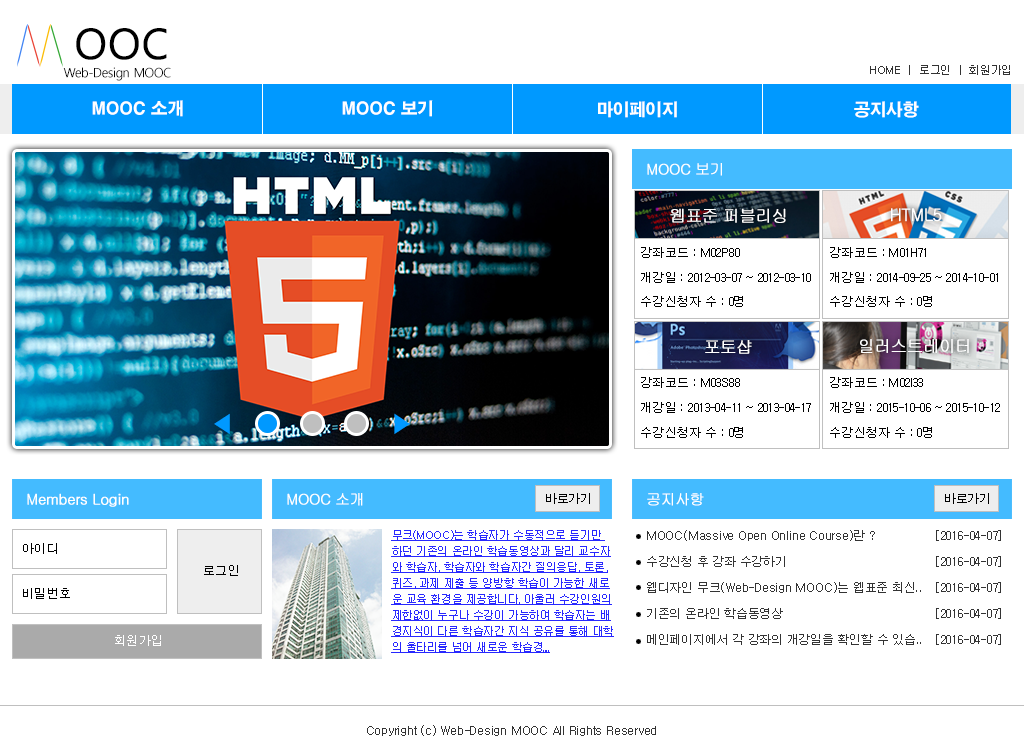
<style>
.page{position:relative;width:1024px;height:755px;background:#ffffff}
.page>*{position:absolute;margin:0}
.t1{font:42px "MalgunGothicRegular";color:#000000;font-weight:bold}
.t2{font:11px "Dotum";letter-spacing:-0.02em;color:#333333}
.t3{font:13px "MalgunGothicRegular";letter-spacing:-0.04em;color:#000000}
.t4{font:17px "H2gtrE";letter-spacing:-0.02em;color:#ffffff}
.t5{font:15px "Gulim";letter-spacing:-0.04em;color:#ffffff;font-weight:bold}
.t6{font:17px "Gulim";letter-spacing:-0.04em;color:#ffffff;font-weight:bold;scale:0.96 1}
.t7{font:12.9px/24.7px "Dotum";letter-spacing:-0.04em;color:#000000}
.t8{font:16.8px "Gulim";letter-spacing:-0.04em;color:#ffffff;font-weight:bold}
.t9{font:12px "Dotum";letter-spacing:-0.04em;color:#000000}
.t10{font:11px/16px "Dotum";letter-spacing:-0.04em;color:#2727ff;text-decoration:underline}
.t11{font:12px/26px "Dotum";letter-spacing:-0.02em;color:#333333}
.t12{font:13px "Dotum";letter-spacing:-0.04em;color:#000000}
.t13{font:13px "Dotum";letter-spacing:-0.04em;color:#ffffff}
.t14{font:12px "Dotum";letter-spacing:-0.02em;color:#333333}
</style>
<div class="page">
<p class="t1" style="left:76px;top:28px;width:91px;height:32px">OOC</p>
<p class="t2" style="left:870px;top:65px;width:140px;height:10px">HOME  |  로그인  |  회원가입</p>
<p class="t3" style="left:63px;top:67px;width:108px;height:14px">Web-Design MOOC</p>
<p class="t4" style="left:92px;top:100px;width:91px;height:17px">MOOC 소개</p>
<p class="t4" style="left:342px;top:100px;width:91px;height:17px">MOOC 보기</p>
<p class="t4" style="left:598px;top:101px;width:79px;height:17px">마이페이지</p>
<p class="t4" style="left:854px;top:101px;width:65px;height:17px">공지사항</p>
<p class="t5" style="left:647px;top:163px;width:75px;height:13px">MOOC 보기</p>
<p class="t6" style="left:670px;top:208px;width:116px;height:15px">웹표준 퍼블리싱</p>
<p class="t6" style="left:891px;top:208px;width:51px;height:14px">HTML5</p>
<p class="t7" style="left:641px;top:247px;width:170px;height:60px">강좌코드 : M02P80<br>개강일 : 2012-03-07 ~ 2012-03-10<br>수강신청자 수 : 0명</p>
<p class="t7" style="left:830px;top:247px;width:168px;height:60px">강좌코드 : M01H71<br>개강일 : 2014-09-25 ~ 2014-10-01<br>수강신청자 수 : 0명</p>
<p class="t8" style="left:705px;top:340px;width:47px;height:14px">포토샵</p>
<p class="t8" style="left:860px;top:339px;width:109px;height:14px">일러스트레이터</p>
<p class="t7" style="left:641px;top:377px;width:170px;height:61px">강좌코드 : M03S88<br>개강일 : 2013-04-11 ~ 2013-04-17<br>수강신청자 수 : 0명</p>
<p class="t7" style="left:830px;top:377px;width:170px;height:61px">강좌코드 : M02I33<br>개강일 : 2015-10-06 ~ 2015-10-12<br>수강신청자 수 : 0명</p>
<p class="t5" style="left:27px;top:493px;width:102px;height:14px">Members Login</p>
<p class="t5" style="left:287px;top:493px;width:76px;height:13px">MOOC 소개</p>
<p class="t9" style="left:546px;top:493px;width:44px;height:11px">바로가기</p>
<p class="t5" style="left:647px;top:493px;width:57px;height:13px">공지사항</p>
<p class="t9" style="left:945px;top:493px;width:44px;height:11px">바로가기</p>
<p class="t10" style="left:391px;top:530px;width:223px;height:123px">무크(MOOC)는 학습자가 수동적으로 듣기만 <br>하던 기존의 온라인 학습동영상과 달리 교수자<br>와 학습자, 학습자와 학습자간 질의응답, 토론,<br>퀴즈, 과제 제출 등 양방향 학습이 가능한 새로<br>운 교육 환경을 제공합니다. 아울러 수강인원의<br>제한없이 누구나 수강이 가능하여 학습자는 배<br>경지식이 다른 학습자간 지식 공유를 통해 대학<br>의 울타리를 넘어 새로운 학습경....</p>
<p class="t11" style="left:647px;top:530px;width:354px;height:115px">MOOC(Massive Open Online Course)란 ?  [2016-04-07]<br>수강신청 후 강좌 수강하기     [2016-04-07]<br>웹디자인 무크(Web-Design MOOC)는 웹표준 최신.. [2016-04-07]<br>기존의 온라인 학습동영상     [2016-04-07]<br>메인페이지에서 각 강좌의 개강일을 확인할 수 있습.. [2016-04-07]</p>
<p class="t12" style="left:23px;top:543px;width:34px;height:11px">아이디</p>
<p class="t12" style="left:204px;top:565px;width:34px;height:11px">로그인</p>
<p class="t12" style="left:23px;top:588px;width:47px;height:11px">비밀번호</p>
<p class="t13" style="left:115px;top:635px;width:46px;height:11px">회원가입</p>
<p class="t14" style="left:367px;top:725px;width:289px;height:11px">Copyright (c) Web-Design MOOC All Rights Reserved</p>
</div>
